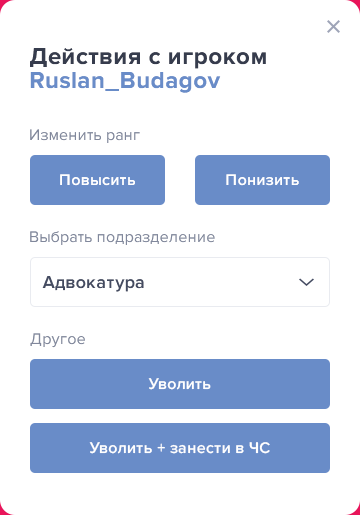
<style>
.page{position:relative;width:360px;height:515px;background:#ffffff}
.page>*{position:absolute;margin:0}
.t1{font:24px/24px "ProximaNova-Bold";letter-spacing:0.02em;color:#363c4d}
.t2{font:24px/24px "ProximaNova-Bold";letter-spacing:0.02em;color:#698cc8}
.t3{font:16px "ProximaNova-Regular";letter-spacing:0.02em;color:#81889c}
.t4{font:16px "ProximaNova-Semibold";letter-spacing:0.02em;color:#ffffff}
.t5{font:18px "ProximaNova-Semibold";letter-spacing:0.02em;color:#444b61}
</style>
<div class="page">
<p class="t1" style="left:30px;top:48px;width:236px;height:45px">Действия с игроком<br><span class="t2">Ruslan_Budagov</span></p>
<p class="t3" style="left:30px;top:129px;width:110px;height:14px">Изменить ранг</p>
<p class="t4" style="left:60px;top:174px;width:75px;height:12px">Повысить</p>
<p class="t4" style="left:226px;top:174px;width:73px;height:12px">Понизить</p>
<p class="t3" style="left:30px;top:231px;width:185px;height:14px">Выбрать подразделение</p>
<p class="t5" style="left:42px;top:276px;width:102px;height:16px">Адвокатура</p>
<p class="t3" style="left:30px;top:333px;width:55px;height:15px">Другое</p>
<p class="t4" style="left:148px;top:378px;width:63px;height:12px">Уволить</p>
<p class="t4" style="left:89px;top:442px;width:181px;height:12px">Уволить + занести в ЧС</p>
</div>
